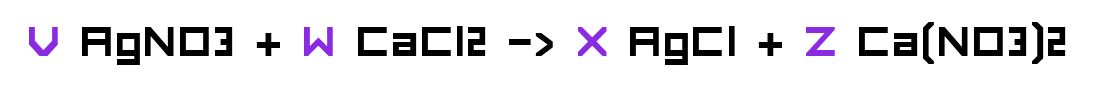
<style>
.page{position:relative;width:1100px;height:85px;background:#ffffff}
.page>*{position:absolute;margin:0}
.t1{font:55px "FORCED-SQUARE";color:#000000}
.t2{font:55px "FORCED-SQUARE";color:#8a2be2}
</style>
<div class="page">
<p class="t1" style="left:29px;top:22px;width:1037px;height:43px"><span class="t2">V</span> AgNO3 + <span class="t2">W </span>CaCl2 -&gt; <span class="t2">X</span> AgCl + <span class="t2">Z </span>Ca(NO3)2</p>
</div>
